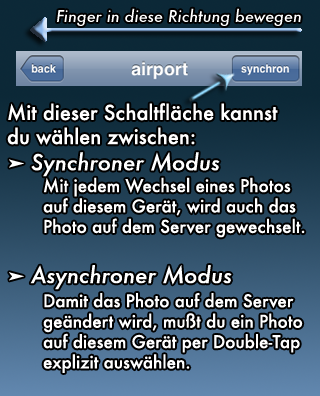
<style>
.page{position:relative;width:320px;height:396px}
.page>*{position:absolute;margin:0}
.t1{font:16px "Futura-MediumItalic";color:#ffffff}
.t2{font:17px "Futura-Medium";color:#ffffff}
.t3{font:20px "Futura-Medium";color:#ffffff}
.t4{font:20px "ArialUnicodeMS";color:#ffffff}
.t5{font:22px "Futura-MediumItalic";color:#ffffff}
</style>
<div class="page">
<p class="t1" style="left:57px;top:8px;width:244px;height:18px">Finger in diese Richtung bewegen</p>
<p class="t2" style="left:7px;top:103px;width:298px;height:270px"><span class="t3">Mit dieser Schaltfläche kannst<br>du wählen zwischen:<br></span><span class="t4">➤ </span><span class="t5">Synchroner Modus<br> </span>Mit jedem Wechsel eines Photos<br> auf diesem Gerät, wird auch das<br> Photo auf dem Server gewechselt.<br><br><span class="t4">➤ </span><span class="t5">Asynchroner Modus<br> </span>Damit das Photo auf dem Server<br> geändert wird, mußt du ein Photo<br> auf diesem Gerät per Double-Tap<br> explizit auswählen.</p>
</div>
